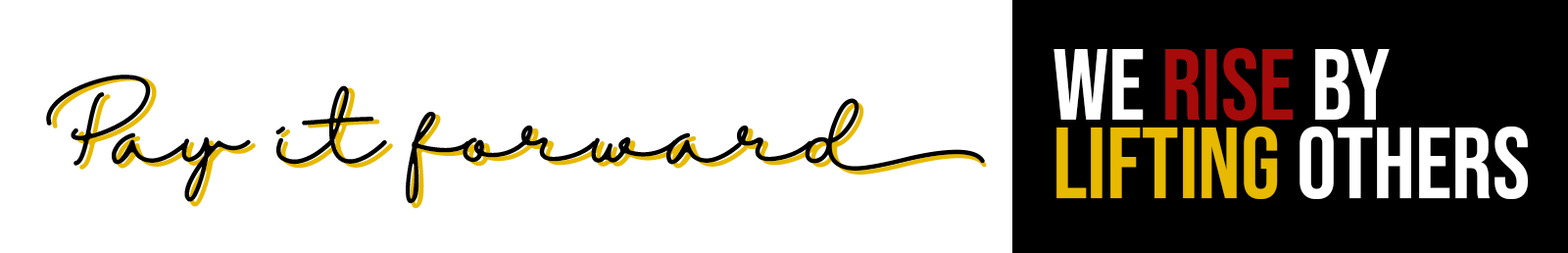
<style>
.page{position:relative;width:1568px;height:253px;background:#ffffff}
.page>*{position:absolute;margin:0}
.t1{font:100.7px/78.4px "BebasNeue-Regular";color:#e7b900}
.t2{font:100.7px/78.4px "BebasNeue-Regular";color:#ffffff}
.t3{font:100.7px/78.4px "BebasNeue-Regular";color:#a50b0b}
.t4{font:84.1px "HalimunRegular";color:#000000}
.t5{font:125.2px "Sudsakorn---Personal-Use";color:#000000}
.t6{font:86.2px "HalimunRegular";color:#e7b900}
.t7{font:125.2px "Sudsakorn---Personal-Use";color:#e7b900}
</style>
<div class="page">
<p class="t1" style="left:1054px;top:48px;width:474px;height:151px"><span class="t2">We </span><span class="t3">rise </span><span class="t2">by <br></span>lifting<span class="t2"> others</span></p>
<p class="t4" style="left:46px;top:74px;width:939px;height:130px">Pay it forwar<span class="t5">d</span></p>
<p class="t6" style="left:52px;top:75px;width:935px;height:134px">Pay it forwar<span class="t7">d</span></p>
</div>
